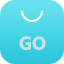
<style>
.page{position:relative;width:64px;height:64px}
.page>*{position:absolute;margin:0}
.t1{font:16.9px "MicrosoftYaHeiUI-Bold";color:#c4e4e9}
</style>
<div class="page">
<p class="t1" style="left:19px;top:36px;width:27px;height:14px">GO</p>
</div>
